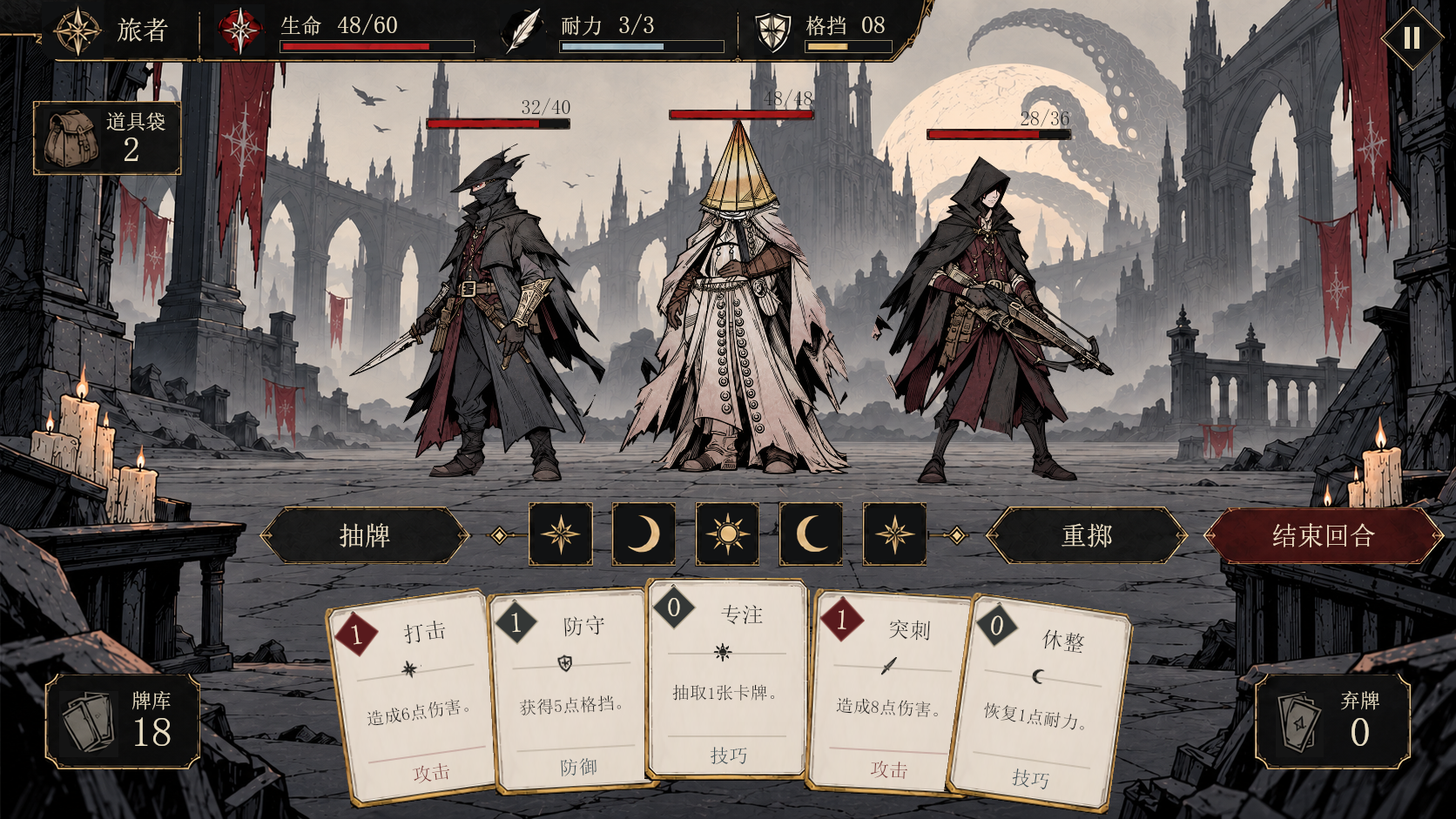
<style>
.page{position:relative;width:1456px;height:819px}
.page>*{position:absolute;margin:0}
.t1{font:26.1px "SimSun";color:#e8ddc2}
.t2{font:20.9px "SimSun";color:#e8ddc2}
.t3{font:24.4px "SimSun";color:#e8ddc2}
.t4{font:20px "SimSun";color:#171818}
.t5{font:20px "SimSun";color:#e8ddc2}
.t6{font:34.8px "SimSun";color:#e8ddc2}
.t7{font:26.1px "SimSun";color:#eee1c6}
.t8{font:27.9px "SimSun";color:#f1e4cb}
.t9{font:21.8px "SimSun";color:#151515}
.t10{font:17.4px "SimSun";color:#191817}
.t11{font:41.8px "SimSun";color:#e8ddc2}
.t12{font:19.2px "SimSun";color:#414f55}
.t13{font:19.2px "SimSun";color:#703331}
</style>
<div class="page">
<p class="t1" style="left:118px;top:17px;width:50px;height:25px">旅者</p>
<p class="t2" style="left:281px;top:16px;width:40px;height:20px">生命</p>
<p class="t3" style="left:337px;top:14px;width:60px;height:22px">48/60</p>
<p class="t2" style="left:562px;top:16px;width:39px;height:20px">耐力</p>
<p class="t3" style="left:619px;top:14px;width:35px;height:22px">3/3</p>
<p class="t2" style="left:805px;top:16px;width:40px;height:20px">格挡</p>
<p class="t3" style="left:862px;top:17px;width:22px;height:16px">08</p>
<p class="t4" style="left:763px;top:89px;width:49px;height:18px">48/48</p>
<p class="t4" style="left:521px;top:98px;width:49px;height:18px">32/40</p>
<p class="t5" style="left:106px;top:112px;width:59px;height:19px">道具袋</p>
<p class="t4" style="left:1020px;top:109px;width:49px;height:18px">28/36</p>
<p class="t6" style="left:124px;top:138px;width:14px;height:23px">2</p>
<p class="t7" style="left:340px;top:523px;width:50px;height:25px">抽牌</p>
<p class="t7" style="left:1061px;top:523px;width:51px;height:25px">重掷</p>
<p class="t7" style="left:1273px;top:523px;width:102px;height:25px">结束回合</p>
<p class="t8" style="left:668px;top:598px;width:12px;height:18px">0</p>
<p class="t9" style="left:721px;top:604px;width:42px;height:21px">专注</p>
<p class="t8" style="left:511px;top:613px;width:10px;height:20px;rotate:-3deg">1</p>
<p class="t9" style="left:564px;top:615px;width:41px;height:22px;rotate:-3deg">防守</p>
<p class="t8" style="left:837px;top:609px;width:9px;height:20px;rotate:3deg">1</p>
<p class="t8" style="left:991px;top:615px;width:12px;height:21px;rotate:8deg">0</p>
<p class="t8" style="left:351px;top:624px;width:11px;height:21px;rotate:-8deg">1</p>
<p class="t9" style="left:403px;top:620px;width:43px;height:24px;rotate:-8deg">打击</p>
<p class="t9" style="left:889px;top:619px;width:42px;height:22px;rotate:3deg">突刺</p>
<p class="t9" style="left:1041px;top:629px;width:44px;height:25px;rotate:8deg">休整</p>
<p class="t10" style="left:672px;top:684px;width:103px;height:17px">抽取1张卡牌。</p>
<p class="t5" style="left:132px;top:691px;width:39px;height:19px">牌库</p>
<p class="t10" style="left:367px;top:699px;width:101px;height:27px;rotate:-8deg">造成6点伤害。</p>
<p class="t10" style="left:519px;top:695px;width:102px;height:21px;rotate:-3deg">获得5点格挡。</p>
<p class="t10" style="left:836px;top:697px;width:102px;height:20px;rotate:3deg">造成8点伤害。</p>
<p class="t10" style="left:984px;top:702px;width:100px;height:28px;rotate:8deg">恢复1点耐力。</p>
<p class="t5" style="left:1341px;top:691px;width:38px;height:19px">弃牌</p>
<p class="t11" style="left:135px;top:717px;width:36px;height:29px">18</p>
<p class="t11" style="left:1351px;top:718px;width:18px;height:28px">0</p>
<p class="t12" style="left:710px;top:747px;width:37px;height:18px">技巧</p>
<p class="t12" style="left:561px;top:758px;width:35px;height:19px;rotate:-3deg">防御</p>
<p class="t13" style="left:870px;top:761px;width:38px;height:18px;rotate:3deg">攻击</p>
<p class="t13" style="left:412px;top:763px;width:38px;height:21px;rotate:-8deg">攻击</p>
<p class="t12" style="left:1012px;top:768px;width:37px;height:22px;rotate:8deg">技巧</p>
</div>
